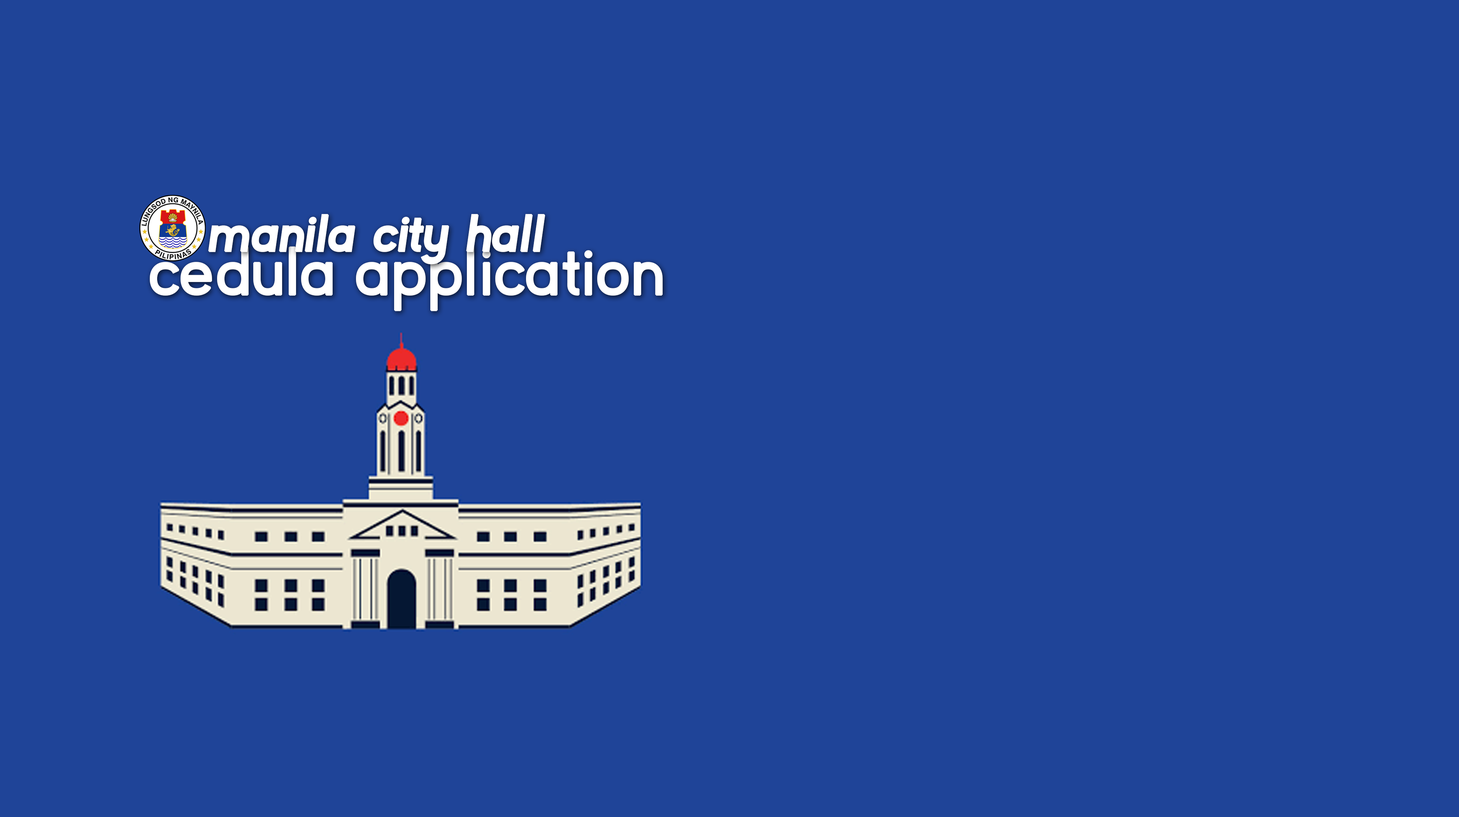
<style>
.page{position:relative;width:1459px;height:817px;background:#1f4498}
.page>*{position:absolute;margin:0}
.t1{font:51.1px "KayakSans-BoldItalic";color:#ffffff;font-weight:bold}
.t2{font:67px "KayakSans";color:#ffffff;font-weight:bold}
</style>
<div class="page">
<p class="t1" style="left:208px;top:214px;width:337px;height:51px">manila city hall</p>
<p class="t2" style="left:150px;top:246px;width:513px;height:65px">cedula application</p>
</div>
